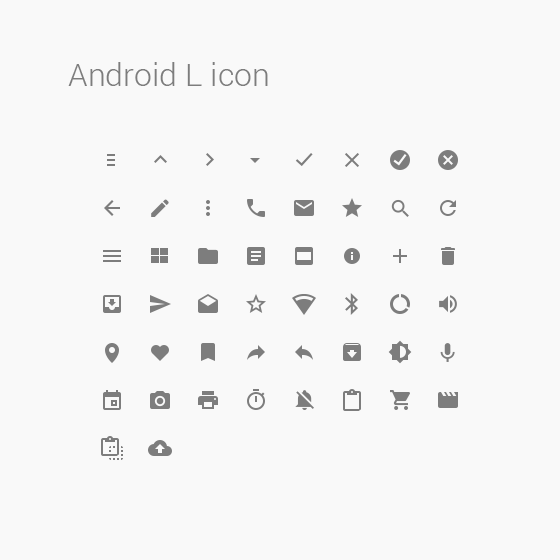
<style>
.page{position:relative;width:560px;height:560px;background:#f9f9f9}
.page>*{position:absolute;margin:0}
.t1{font:32px "Roboto-Light";color:#7d7d7d}
</style>
<div class="page">
<p class="t1" style="left:68px;top:62px;width:200px;height:24px">Android L icon</p>
</div>
